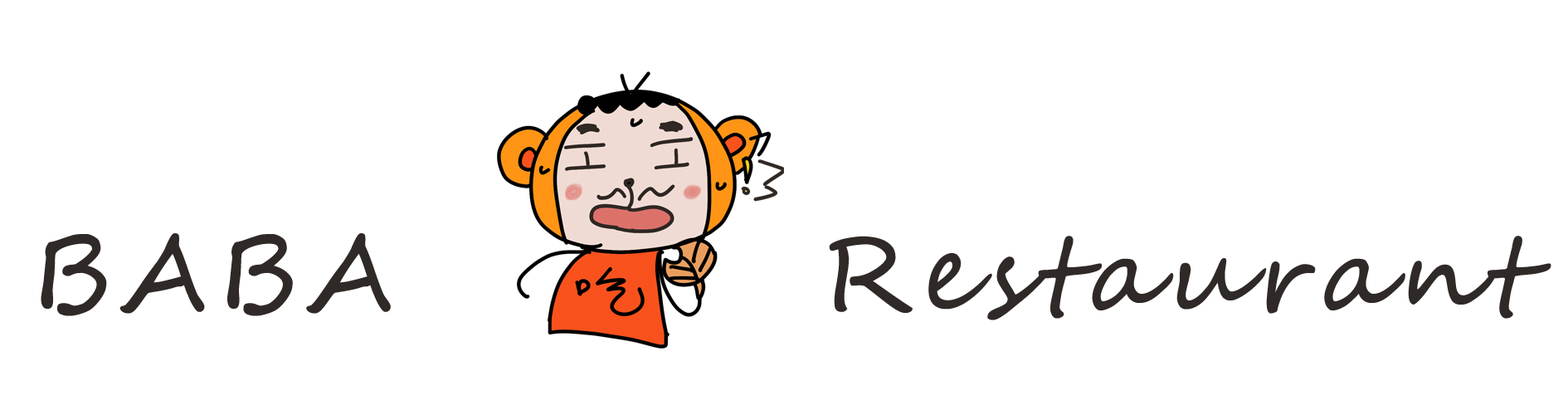
<style>
.page{position:relative;width:1568px;height:410px;background:#ffffff}
.page>*{position:absolute;margin:0}
.t1{font:103.7px "SegoeScript";letter-spacing:0.075em;color:#2f2927;font-weight:bold}
</style>
<div class="page">
<p class="t1" style="left:41px;top:233px;width:1510px;height:87px">BABA        Restaurant</p>
</div>
